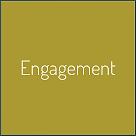
<style>
.page{position:relative;width:136px;height:136px;background:#ab9a32}
.page>*{position:absolute;margin:0}
.t1{font:20px "Dosis-Light";color:#ffffff}
</style>
<div class="page">
<p class="t1" style="left:21px;top:60px;width:95px;height:20px">Engagement</p>
</div>
